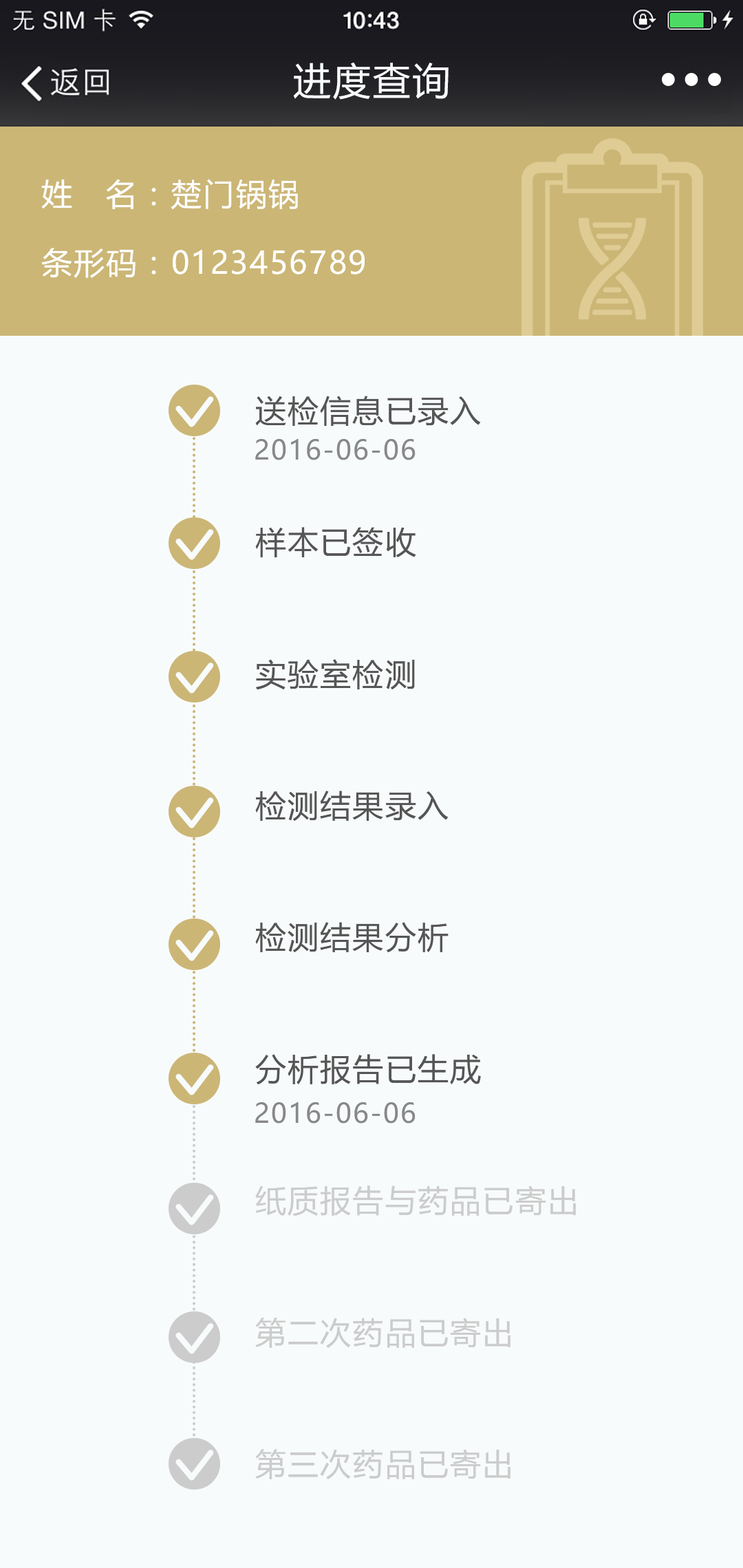
<style>
.page{position:relative;width:743px;height:1568px;background:#f8fbfc}
.page>*{position:absolute;margin:0}
.t1{font:37.8px "MicrosoftYaHei";letter-spacing:0.05em;color:#f8fbfc}
.t2{font:31px/68.8px "MicrosoftYaHei";letter-spacing:0.05em;color:#ffffff}
.t3{font:31px "MicrosoftYaHei";letter-spacing:0.05em;color:#555555}
.t4{font:26.8px "MicrosoftYaHei";letter-spacing:0.05em;color:#888888}
.t5{font:31px "MicrosoftYaHei";letter-spacing:0.05em;color:#cccccc}
</style>
<div class="page">
<p class="t1" style="left:293px;top:62px;width:156px;height:38px">进度查询</p>
<p class="t2" style="left:41px;top:179px;width:324px;height:99px;text-align:justify">姓   名：楚门锅锅<br>条形码：0123456789</p>
<p class="t3" style="left:255px;top:396px;width:226px;height:30px">送检信息已录入</p>
<p class="t4" style="left:255px;top:438px;width:161px;height:22px">2016-06-06</p>
<p class="t3" style="left:255px;top:527px;width:161px;height:31px">样本已签收</p>
<p class="t3" style="left:256px;top:659px;width:159px;height:31px">实验室检测</p>
<p class="t3" style="left:255px;top:791px;width:194px;height:30px">检测结果录入</p>
<p class="t3" style="left:255px;top:922px;width:194px;height:31px">检测结果分析</p>
<p class="t3" style="left:255px;top:1054px;width:226px;height:31px">分析报告已生成</p>
<p class="t4" style="left:255px;top:1102px;width:161px;height:22px">2016-06-06</p>
<p class="t5" style="left:255px;top:1185px;width:321px;height:31px">纸质报告与药品已寄出</p>
<p class="t5" style="left:255px;top:1318px;width:256px;height:30px">第二次药品已寄出</p>
<p class="t5" style="left:255px;top:1449px;width:256px;height:30px">第三次药品已寄出</p>
</div>
